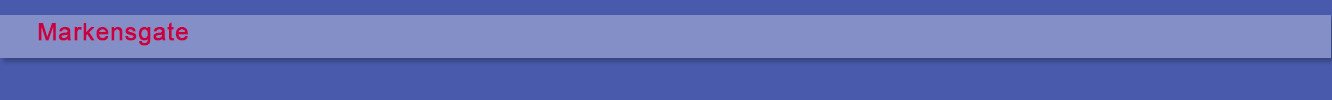
<style>
.page{position:relative;width:1332px;height:100px;background:#495aac}
.page>*{position:absolute;margin:0}
.t1{font:24px "ArialMT";letter-spacing:0.025em;color:#c80042;font-weight:bold}
</style>
<div class="page">
<p class="t1" style="left:38px;top:22px;width:150px;height:24px">Markensgate</p>
</div>
